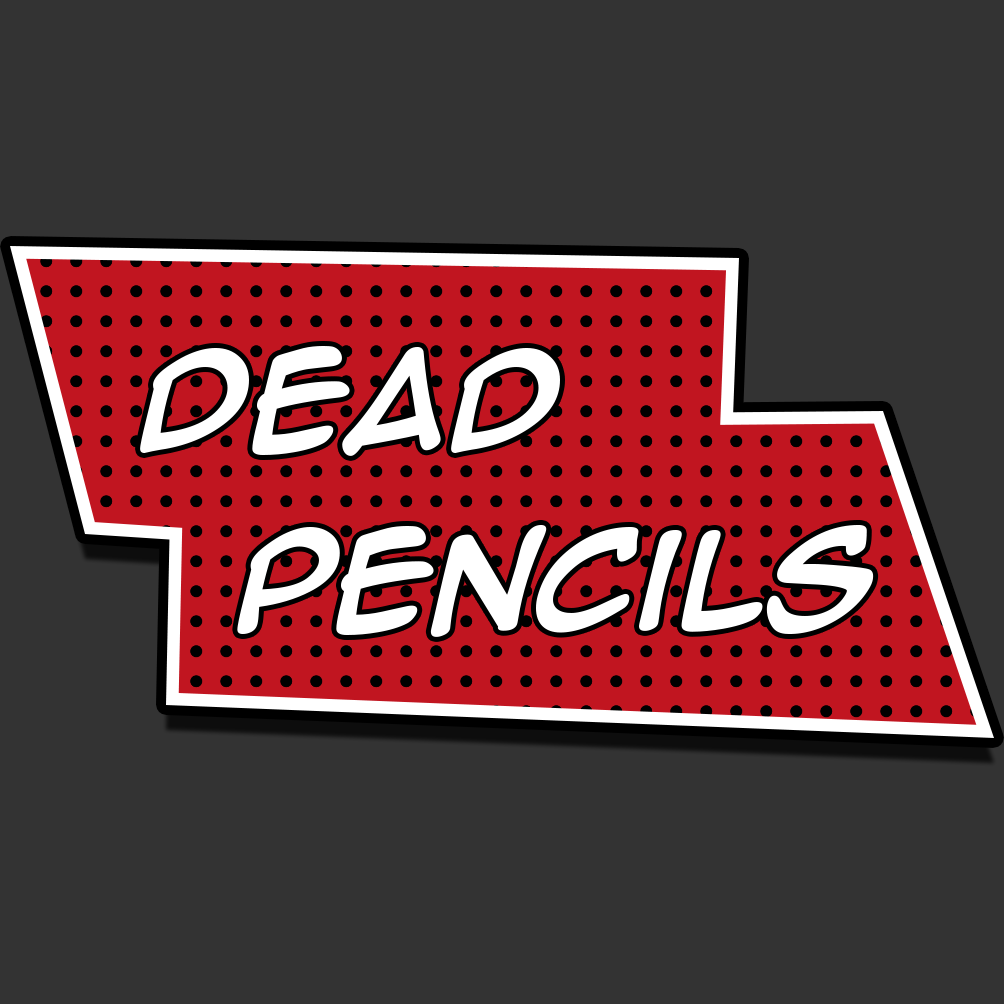
<style>
.page{position:relative;width:1004px;height:1004px;background:#333333}
.page>*{position:absolute;margin:0}
.t1{font:113.4px "AnimeAce2.0BB-Bold";color:#ffffff}
</style>
<div class="page">
<p class="t1" style="left:140px;top:346px;width:420px;height:110px">Dead</p>
<p class="t1" style="left:237px;top:525px;width:637px;height:112px">Pencils</p>
</div>
